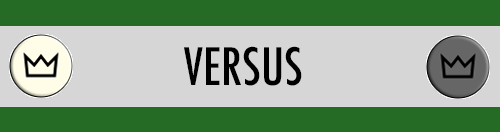
<style>
.page{position:relative;width:500px;height:132px;background:#d6d6d6}
.page>*{position:absolute;margin:0}
.t1{font:50px "Futura-CondensedMedium";color:#000000}
</style>
<div class="page">
<p class="t1" style="left:184px;top:46px;width:118px;height:40px">VERSUS</p>
</div>
